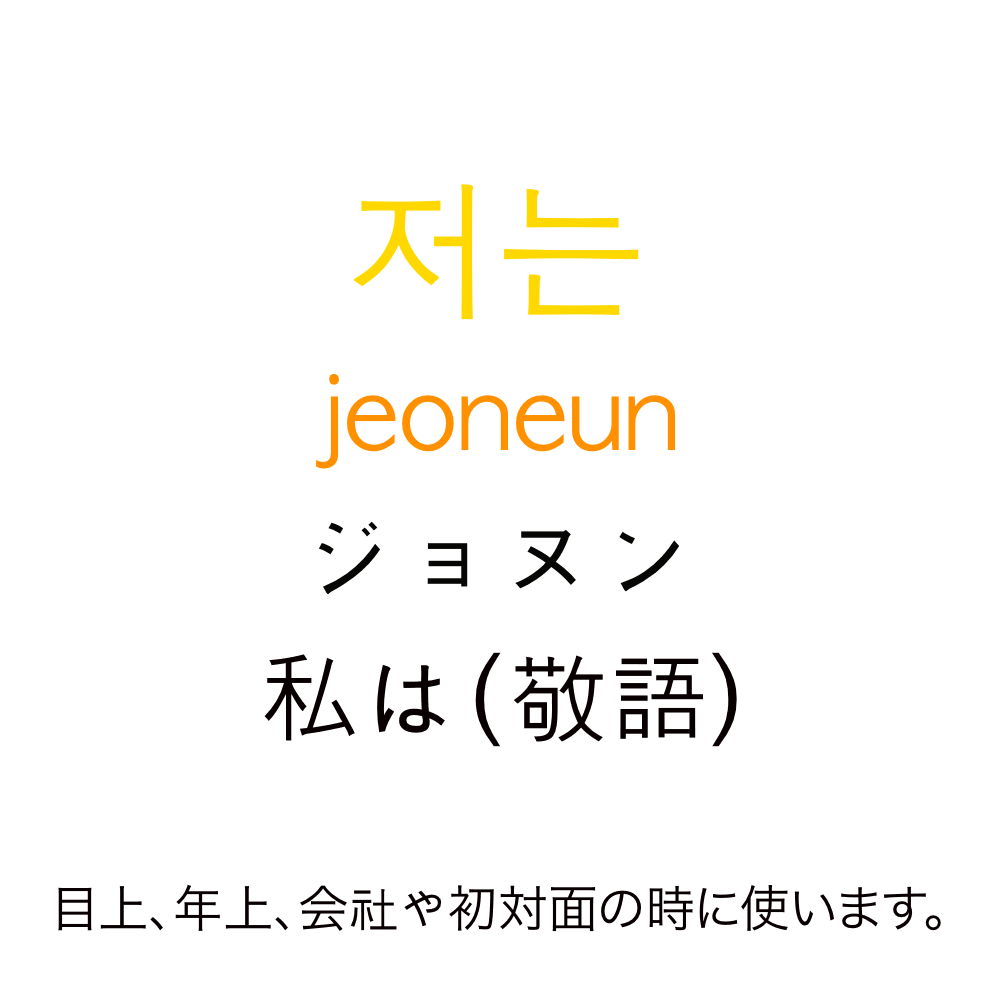
<style>
.page{position:relative;width:1000px;height:1000px;background:#ffffff}
.page>*{position:absolute;margin:0}
.t1{font:150px "AppleGothic";color:#ffd800}
.t2{font:100px "AppleGothic";color:#ff9000}
.t3{font:100px "AppleGothic";color:#060605}
.t4{font:100px "AppleGothic";color:#080000}
.t5{font:50px "HiraKakuProN-W3";color:#080000}
.t6{font:50px "AppleGothic";color:#080000}
</style>
<div class="page">
<p class="t1" style="left:353px;top:184px;width:286px;height:136px">저는</p>
<p class="t2" style="left:316px;top:374px;width:359px;height:95px">jeoneun</p>
<p class="t3" style="left:319px;top:521px;width:360px;height:73px">ジョヌン</p>
<p class="t4" style="left:264px;top:652px;width:473px;height:95px">私は(敬語）</p>
<p class="t5" style="left:58px;top:884px;width:883px;height:48px">目上、年上、会<span class="t6">社や</span>初対面の時に使います。</p>
</div>
